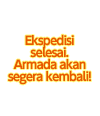
<style>
.page{position:relative;width:100px;height:116px;background:#ffffff}
.page>*{position:absolute;margin:0}
.t1{font:12px/12px "UDShinGoPro-Bold";letter-spacing:-0.08em;color:#e85700}
</style>
<div class="page">
<p class="t1" style="left:8px;top:34px;width:83px;height:51px;text-align:center">Ekspedisi<br>selesai.<br>Armada akan<br>segera kembali!</p>
</div>
